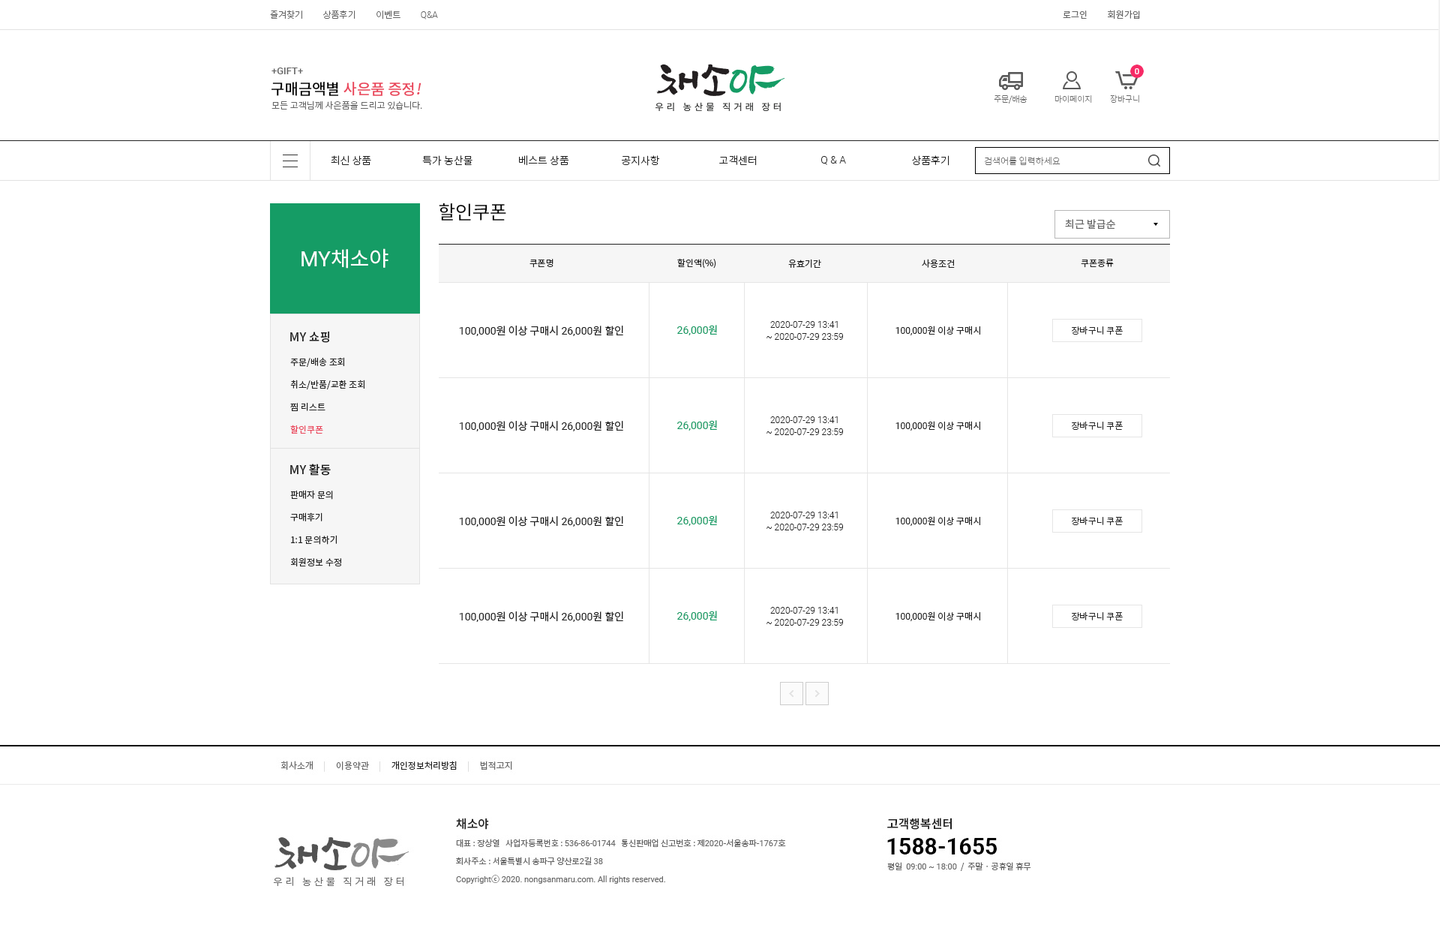
<style>
.page{position:relative;width:1440px;height:952px;background:#ffffff}
.page>*{position:absolute;margin:0}
.t1{font:9px "NotoSansCJKkr-Light";color:#666666}
.t2{font:9px "Roboto-Light";color:#666666}
.t3{font:9px "NotoSansCJKkr-DemiLight";color:#666666}
.t4{font:9.7px "Roboto-Medium";color:#666666}
.t5{font:15px "NotoSansCJKkr-Medium";color:#ea475c}
.t6{font:15px "NotoSansCJKkr-Medium";color:#000000}
.t7{font:15px "NotoSansCJKkr-Medium";color:#ea475c;font-style:italic}
.t8{font:8.2px "NotoSansCJKkr-Thin";color:#666666}
.t9{font:10.5px "NotoSansCJKkr-Light";color:#222222}
.t10{font:10.5px "Roboto-Light";color:#222222}
.t11{font:9px "NotoSansCJKkr-Thin";color:#666666}
.t12{font:18.7px "NotoSansCJKkr-Regular";color:#000000}
.t13{font:10.5px "NotoSansCJKkr-Regular";color:#666666}
.t14{font:21px "NotoSansCJKkr-Regular";color:#ffffff}
.t15{font:21px "Roboto-Regular";color:#ffffff}
.t16{font:9px "NotoSansCJKkr-Regular";color:#222222}
.t17{font:10.5px "NotoSansCJKkr-Regular";color:#222222}
.t18{font:10.5px "Roboto-Regular";color:#222222}
.t19{font:10.5px "Roboto-Regular";color:#159c65}
.t20{font:10.5px "NotoSansCJKkr-Regular";color:#159c65}
.t21{font:9px/12px "Roboto-Light";color:#222222}
.t22{font:9px "Roboto-Regular";color:#222222}
.t23{font:9px "NotoSansCJKkr-Light";color:#222222}
.t24{font:12px "NotoSansCJKkr-Medium";color:#222222}
.t25{font:9px/22.5px "NotoSansCJKkr-Regular";color:#222222}
.t26{font:9px/22.5px "NotoSansCJKkr-Regular";color:#ea475c}
</style>
<div class="page">
<p class="t1" style="left:270px;top:10px;width:168px;height:9px">즐겨찾기          상품후기          이벤트          <span class="t2">Q&amp;A</span></p>
<p class="t3" style="left:1063px;top:10px;width:77px;height:9px">로그인          회원가입</p>
<p class="t4" style="left:271px;top:67px;width:32px;height:7px">+GIFT+</p>
<p class="t5" style="left:271px;top:82px;width:150px;height:14px"><span class="t6">구매금액별 </span>사은품 증정<span class="t7">!</span></p>
<p class="t1" style="left:271px;top:100px;width:151px;height:9px">모든 고객님께 사은품을 드리고 있습니다.</p>
<p class="t8" style="left:994px;top:94px;width:33px;height:9px">주문/배송</p>
<p class="t8" style="left:1054px;top:95px;width:38px;height:8px">마이페이지</p>
<p class="t8" style="left:1110px;top:94px;width:29px;height:9px">장바구니</p>
<p class="t9" style="left:331px;top:155px;width:40px;height:10px">최신 상품</p>
<p class="t9" style="left:422px;top:155px;width:50px;height:11px">특가 농산물</p>
<p class="t9" style="left:519px;top:155px;width:50px;height:11px">베스트 상품</p>
<p class="t9" style="left:622px;top:155px;width:38px;height:11px">공지사항</p>
<p class="t9" style="left:719px;top:155px;width:38px;height:11px">고객센터</p>
<p class="t10" style="left:821px;top:156px;width:25px;height:9px">Q &amp; A</p>
<p class="t9" style="left:912px;top:155px;width:37px;height:11px">상품후기</p>
<p class="t11" style="left:984px;top:156px;width:76px;height:10px">검색어를 입력하세요</p>
<p class="t12" style="left:439px;top:202px;width:67px;height:18px">할인쿠폰</p>
<p class="t13" style="left:1065px;top:219px;width:50px;height:10px">최근 발급순</p>
<p class="t14" style="left:301px;top:248px;width:87px;height:20px"><span class="t15">MY</span>채소야</p>
<p class="t16" style="left:677px;top:258px;width:39px;height:10px">할인액(%)</p>
<p class="t16" style="left:529px;top:259px;width:24px;height:9px">쿠폰명</p>
<p class="t16" style="left:788px;top:259px;width:33px;height:9px">유효기간</p>
<p class="t16" style="left:922px;top:259px;width:33px;height:9px">사용조건</p>
<p class="t16" style="left:1081px;top:259px;width:33px;height:9px">쿠폰종류</p>
<p class="t17" style="left:459px;top:325px;width:164px;height:11px"><span class="t18">100,000</span>원 이상 구매시 <span class="t18">26,000</span>원 할인</p>
<p class="t19" style="left:677px;top:325px;width:40px;height:10px">26,000<span class="t20">원</span></p>
<p class="t21" style="left:766px;top:321px;width:77px;height:19px;text-align:center">2020-07-29 13:41<br>~ 2020-07-29 23:59</p>
<p class="t16" style="left:895px;top:325px;width:85px;height:10px"><span class="t22">100,000</span>원 이상 구매시</p>
<p class="t23" style="left:1072px;top:325px;width:51px;height:10px">장바구니 쿠폰</p>
<p class="t24" style="left:290px;top:331px;width:39px;height:12px">MY 쇼핑</p>
<p class="t25" style="left:290px;top:357px;width:74px;height:77px">주문/배송 조회<br>취소/반품/교환 조회<br>찜 리스트<br><span class="t26">할인쿠폰</span></p>
<p class="t17" style="left:459px;top:421px;width:164px;height:10px"><span class="t18">100,000</span>원 이상 구매시 <span class="t18">26,000</span>원 할인</p>
<p class="t19" style="left:677px;top:420px;width:40px;height:10px">26,000<span class="t20">원</span></p>
<p class="t21" style="left:766px;top:416px;width:77px;height:19px;text-align:center">2020-07-29 13:41<br>~ 2020-07-29 23:59</p>
<p class="t16" style="left:895px;top:421px;width:85px;height:9px"><span class="t22">100,000</span>원 이상 구매시</p>
<p class="t23" style="left:1072px;top:421px;width:51px;height:9px">장바구니 쿠폰</p>
<p class="t24" style="left:290px;top:463px;width:41px;height:12px">MY 활동</p>
<p class="t25" style="left:290px;top:490px;width:51px;height:76px">판매자 문의<br>구매후기<br>1:1 문의하기<br>회원정보 수정</p>
<p class="t17" style="left:459px;top:516px;width:164px;height:10px"><span class="t18">100,000</span>원 이상 구매시 <span class="t18">26,000</span>원 할인</p>
<p class="t19" style="left:677px;top:515px;width:40px;height:11px">26,000<span class="t20">원</span></p>
<p class="t21" style="left:766px;top:511px;width:77px;height:19px;text-align:center">2020-07-29 13:41<br>~ 2020-07-29 23:59</p>
<p class="t16" style="left:895px;top:516px;width:85px;height:10px"><span class="t22">100,000</span>원 이상 구매시</p>
<p class="t23" style="left:1072px;top:516px;width:51px;height:10px">장바구니 쿠폰</p>
<p class="t17" style="left:459px;top:611px;width:164px;height:11px"><span class="t18">100,000</span>원 이상 구매시 <span class="t18">26,000</span>원 할인</p>
<p class="t19" style="left:677px;top:610px;width:40px;height:11px">26,000<span class="t20">원</span></p>
<p class="t21" style="left:766px;top:607px;width:77px;height:18px;text-align:center">2020-07-29 13:41<br>~ 2020-07-29 23:59</p>
<p class="t16" style="left:895px;top:611px;width:85px;height:10px"><span class="t22">100,000</span>원 이상 구매시</p>
<p class="t23" style="left:1072px;top:611px;width:51px;height:10px">장바구니 쿠폰</p>
</div>
